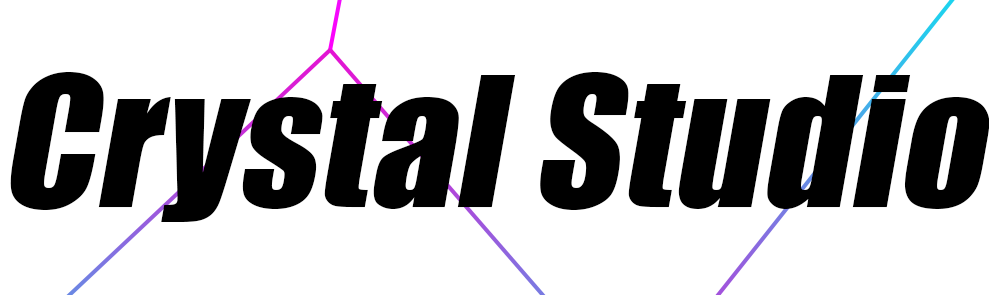
<style>
.page{position:relative;width:1000px;height:295px;background:#ffffff}
.page>*{position:absolute;margin:0}
.t1{font:166.7px "Impact";letter-spacing:0.01em;color:#000000;font-style:italic}
</style>
<div class="page">
<p class="t1" style="left:10px;top:72px;width:979px;height:150px">Crystal Studio</p>
</div>
